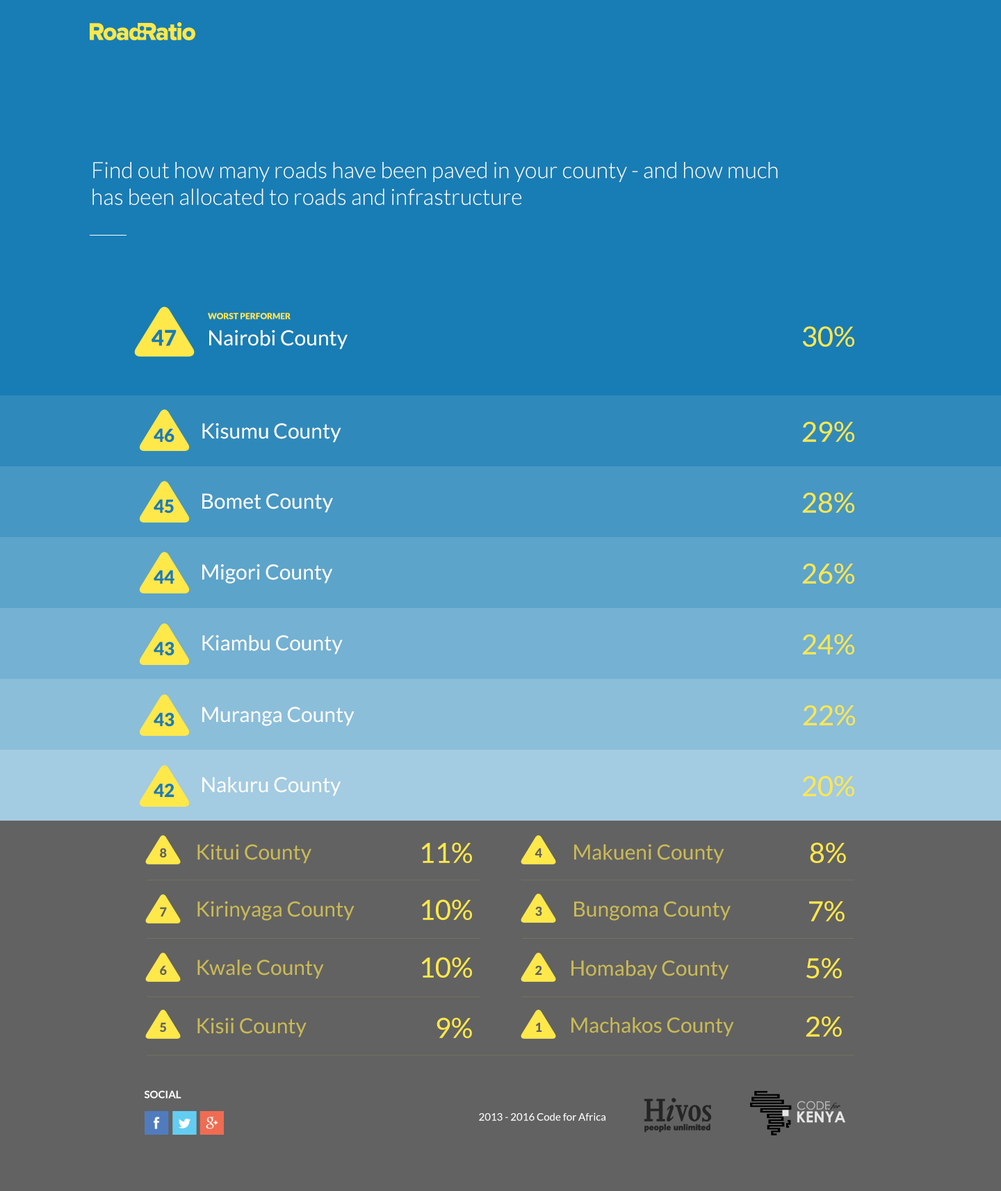
<style>
.page{position:relative;width:1001px;height:1191px;background:#187db4}
.page>*{position:absolute;margin:0}
.t1{font:22.2px "Lato-Light";color:#fefefe}
.t2{font:8.3px "Lato-Black";color:#ffe84a}
.t3{font:21.7px "Lato-Black";color:#187db4}
.t4{font:27.8px "Lato-Regular";color:#ffe84a}
.t5{font:20.9px "Lato-Regular";color:#fefefe}
.t6{font:18.1px "Lato-Black";color:#187db4}
.t7{font:20.9px "Lato-Regular";color:#caba54}
.t8{font:12.5px "Lato-Black";color:#626262}
.t9{font:10.4px "Lato-Bold";color:#ffffff}
.t10{font:10.4px "Lato-Regular";color:#ffffff}
</style>
<div class="page">
<p class="t1" style="left:92px;top:162px;width:686px;height:43px">Find out how many roads have been paved in your county - and how much has been allocated to roads and infrastructure</p>
<p class="t2" style="left:208px;top:313px;width:83px;height:7px">WORST PERFORMER</p>
<p class="t3" style="left:151px;top:329px;width:26px;height:17px">47</p>
<p class="t4" style="left:803px;top:326px;width:51px;height:21px">30%</p>
<p class="t5" style="left:209px;top:330px;width:139px;height:20px">Nairobi County</p>
<p class="t5" style="left:202px;top:423px;width:139px;height:20px">Kisumu County</p>
<p class="t4" style="left:802px;top:421px;width:52px;height:21px">29%</p>
<p class="t6" style="left:154px;top:428px;width:20px;height:15px">46</p>
<p class="t5" style="left:202px;top:494px;width:131px;height:19px">Bomet County</p>
<p class="t4" style="left:802px;top:492px;width:52px;height:21px">28%</p>
<p class="t6" style="left:154px;top:499px;width:20px;height:15px">45</p>
<p class="t6" style="left:154px;top:570px;width:20px;height:14px">44</p>
<p class="t5" style="left:202px;top:564px;width:130px;height:20px">Migori County</p>
<p class="t4" style="left:802px;top:563px;width:52px;height:21px">26%</p>
<p class="t6" style="left:154px;top:642px;width:20px;height:14px">43</p>
<p class="t6" style="left:154px;top:642px;width:20px;height:14px">43</p>
<p class="t5" style="left:202px;top:635px;width:141px;height:20px">Kiambu County</p>
<p class="t4" style="left:802px;top:634px;width:52px;height:21px">24%</p>
<p class="t6" style="left:154px;top:712px;width:20px;height:15px">43</p>
<p class="t5" style="left:202px;top:707px;width:152px;height:19px">Muranga County</p>
<p class="t4" style="left:803px;top:705px;width:52px;height:21px">22%</p>
<p class="t6" style="left:154px;top:783px;width:20px;height:14px">42</p>
<p class="t5" style="left:202px;top:777px;width:139px;height:20px">Nakuru County</p>
<p class="t4" style="left:802px;top:776px;width:52px;height:21px">20%</p>
<p class="t7" style="left:197px;top:845px;width:114px;height:19px">Kitui County</p>
<p class="t4" style="left:421px;top:842px;width:51px;height:21px">11%</p>
<p class="t7" style="left:574px;top:845px;width:150px;height:19px">Makueni County</p>
<p class="t4" style="left:810px;top:842px;width:36px;height:21px">8%</p>
<p class="t8" style="left:160px;top:848px;width:7px;height:10px">8</p>
<p class="t8" style="left:535px;top:848px;width:7px;height:10px">4</p>
<p class="t7" style="left:197px;top:902px;width:157px;height:19px">Kirinyaga County</p>
<p class="t4" style="left:421px;top:899px;width:51px;height:21px">10%</p>
<p class="t7" style="left:574px;top:902px;width:157px;height:19px">Bungoma County</p>
<p class="t4" style="left:809px;top:901px;width:36px;height:21px">7%</p>
<p class="t8" style="left:160px;top:907px;width:7px;height:10px">7</p>
<p class="t8" style="left:535px;top:906px;width:7px;height:10px">3</p>
<p class="t8" style="left:160px;top:965px;width:7px;height:10px">6</p>
<p class="t7" style="left:197px;top:960px;width:127px;height:19px">Kwale County</p>
<p class="t4" style="left:421px;top:957px;width:51px;height:21px">10%</p>
<p class="t8" style="left:535px;top:965px;width:7px;height:10px">2</p>
<p class="t7" style="left:571px;top:961px;width:157px;height:19px">Homabay County</p>
<p class="t4" style="left:806px;top:958px;width:36px;height:21px">5%</p>
<p class="t8" style="left:160px;top:1022px;width:6px;height:10px">5</p>
<p class="t7" style="left:197px;top:1018px;width:110px;height:20px">Kisii County</p>
<p class="t4" style="left:437px;top:1018px;width:35px;height:20px">9%</p>
<p class="t8" style="left:535px;top:1022px;width:7px;height:10px">1</p>
<p class="t7" style="left:571px;top:1018px;width:163px;height:19px">Machakos County</p>
<p class="t4" style="left:806px;top:1016px;width:36px;height:21px">2%</p>
<p class="t9" style="left:144px;top:1091px;width:37px;height:8px">SOCIAL</p>
<p class="t10" style="left:479px;top:1113px;width:126px;height:8px">2013 - 2016 Code for Africa</p>
</div>
